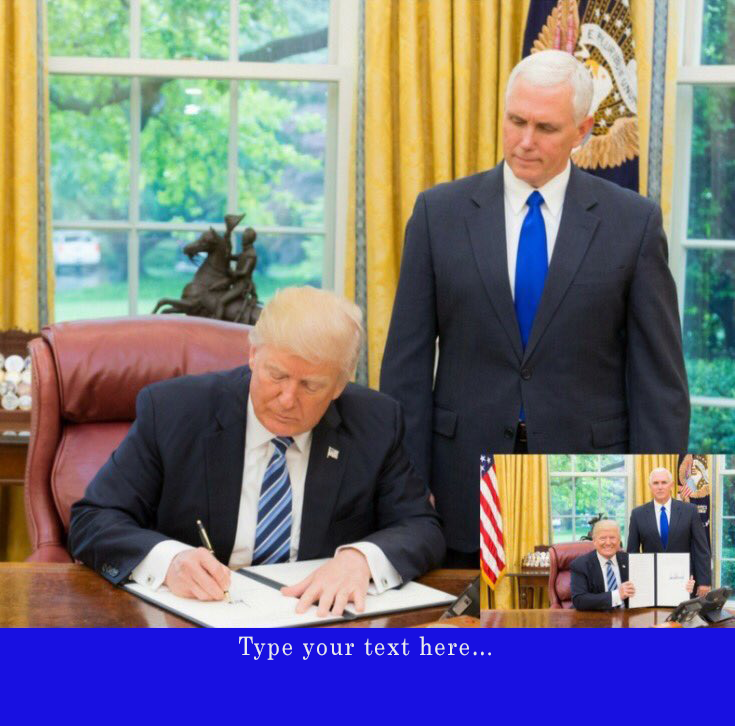
<style>
.page{position:relative;width:735px;height:726px}
.page>*{position:absolute;margin:0}
.t1{font:25.2px "Century";letter-spacing:0.07em;color:#f9f9f9;scale:0.9 1}
</style>
<div class="page">
<p class="t1" style="left:239px;top:636px;width:252px;height:24px">Type your text here…</p>
</div>
